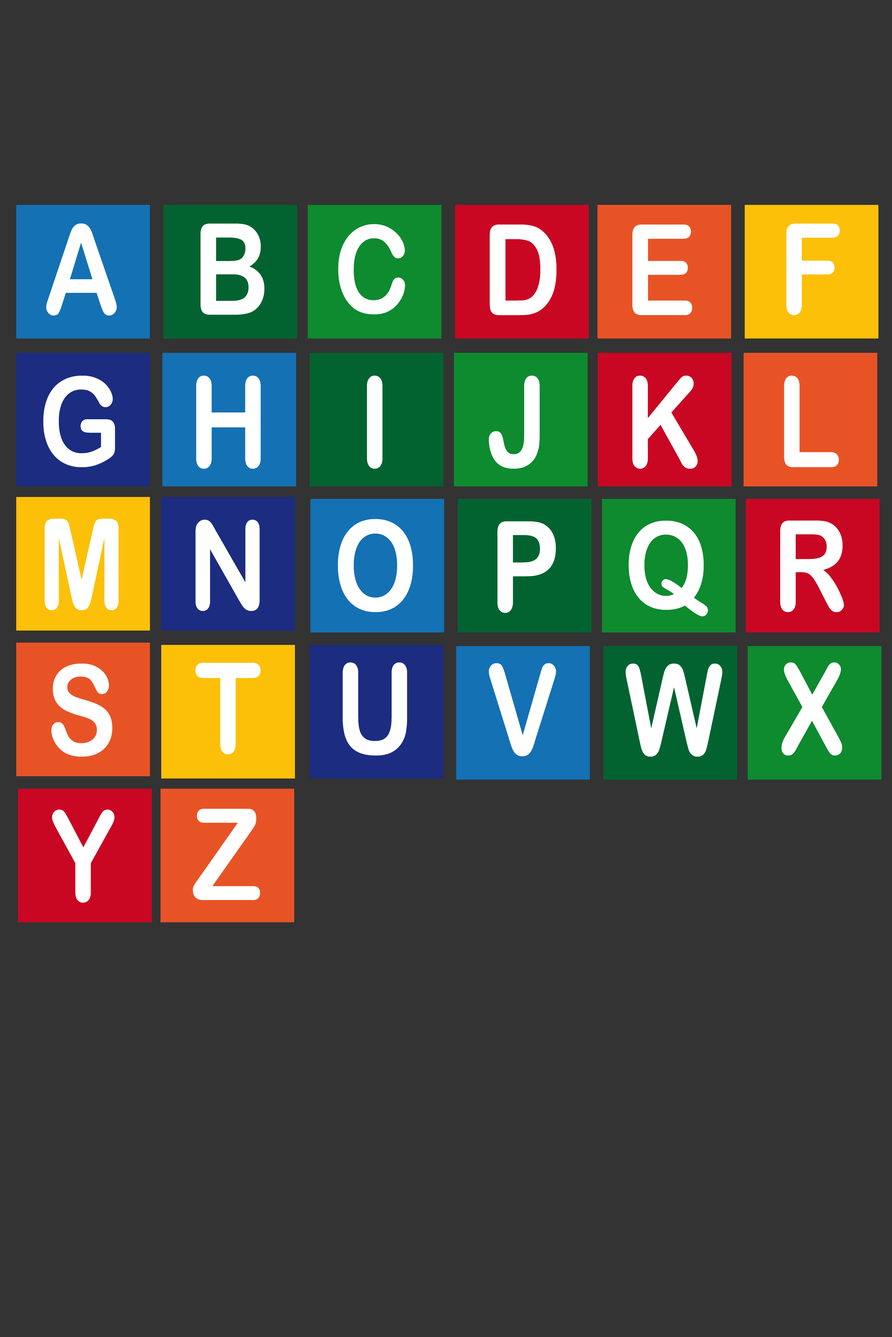
<style>
.page{position:relative;width:892px;height:1337px;background:#333333}
.page>*{position:absolute;margin:0}
.t1{font:124.3px "ArialRoundedMTBold";color:#ffffff;scale:0.85 1}
.t2{font:127.3px "ArialRoundedMTBold";color:#ffffff;scale:0.84 1}
.t3{font:121.9px "ArialRoundedMTBold";color:#ffffff;scale:0.86 1}
.t4{font:126.6px "ArialRoundedMTBold";color:#ffffff;scale:0.86 1}
.t5{font:125.8px "ArialRoundedMTBold";color:#ffffff;scale:0.85 1}
.t6{font:123.6px "ArialRoundedMTBold";color:#ffffff;scale:0.85 1}
.t7{font:123.3px "ArialRoundedMTBold";color:#ffffff;scale:0.87 1}
.t8{font:120.4px "ArialRoundedMTBold";color:#ffffff;scale:0.89 1}
.t9{font:127.5px "ArialRoundedMTBold";color:#ffffff;scale:0.84 1}
</style>
<div class="page">
<p class="t1" style="left:46px;top:223px;width:71px;height:93px">A</p>
<p class="t2" style="left:200px;top:223px;width:65px;height:92px">B</p>
<p class="t3" style="left:338px;top:224px;width:67px;height:90px">C</p>
<p class="t4" style="left:489px;top:225px;width:67px;height:91px">D</p>
<p class="t4" style="left:632px;top:225px;width:60px;height:90px">E</p>
<p class="t5" style="left:786px;top:223px;width:54px;height:92px">F</p>
<p class="t6" style="left:43px;top:376px;width:72px;height:92px">G</p>
<p class="t5" style="left:196px;top:376px;width:65px;height:93px">H</p>
<p class="t5" style="left:367px;top:376px;width:15px;height:93px">I</p>
<p class="t5" style="left:488px;top:376px;width:51px;height:93px">J</p>
<p class="t5" style="left:632px;top:376px;width:66px;height:93px">K</p>
<p class="t5" style="left:784px;top:376px;width:55px;height:91px">L</p>
<p class="t5" style="left:45px;top:519px;width:74px;height:91px">M</p>
<p class="t7" style="left:195px;top:520px;width:65px;height:92px">N</p>
<p class="t5" style="left:337px;top:519px;width:76px;height:94px">O</p>
<p class="t5" style="left:497px;top:521px;width:59px;height:92px">P</p>
<p class="t8" style="left:628px;top:521px;width:80px;height:96px">Q</p>
<p class="t5" style="left:779px;top:521px;width:65px;height:91px">R</p>
<p class="t5" style="left:51px;top:664px;width:61px;height:93px">S</p>
<p class="t5" style="left:195px;top:663px;width:65px;height:92px">T</p>
<p class="t5" style="left:342px;top:662px;width:65px;height:94px">U</p>
<p class="t5" style="left:488px;top:663px;width:68px;height:93px">V</p>
<p class="t5" style="left:625px;top:664px;width:97px;height:93px">W</p>
<p class="t5" style="left:781px;top:662px;width:61px;height:94px">X</p>
<p class="t5" style="left:52px;top:810px;width:62px;height:93px">Y</p>
<p class="t9" style="left:193px;top:809px;width:67px;height:91px">Z</p>
</div>
